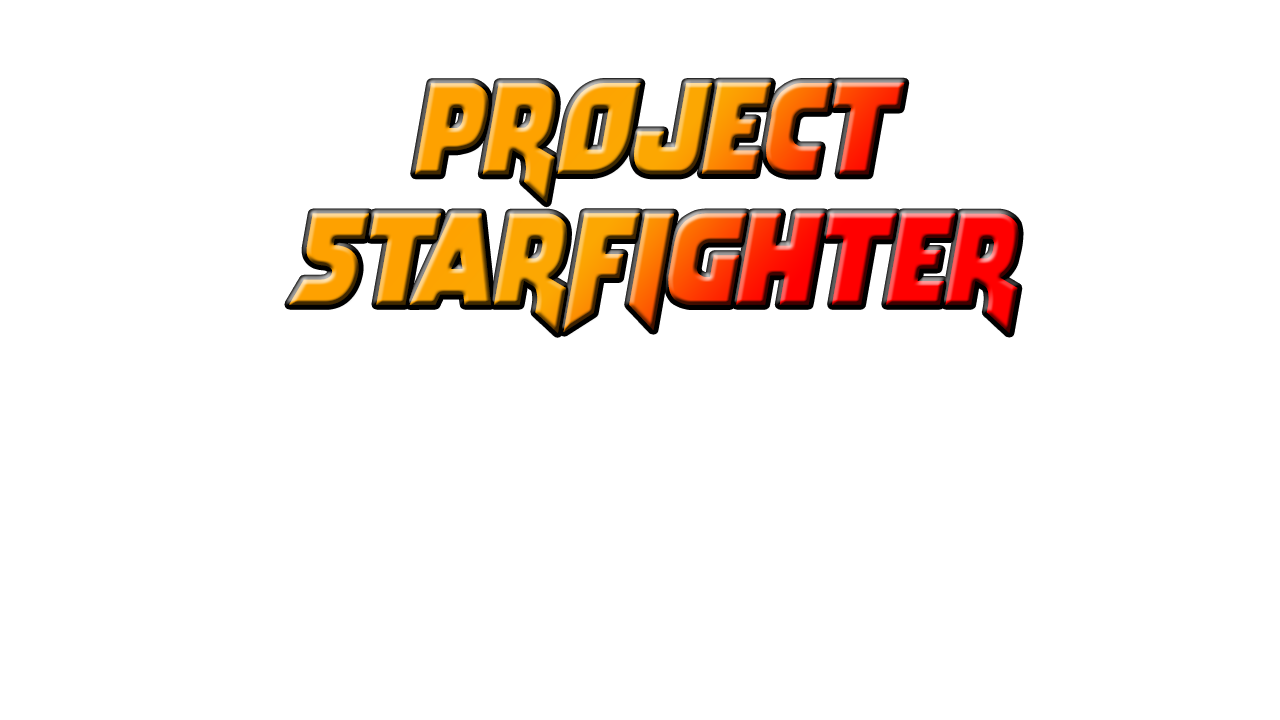
<style>
.page{position:relative;width:1280px;height:720px;background:#ffffff}
.page>*{position:absolute;margin:0}
.t1{font:130px/83.3px "Arwing";font-style:italic}
.t2{font:130px/83.3px "Arwing";letter-spacing:-0.16em;font-style:italic}
.t3{font:130px/83.3px "Arwing";letter-spacing:-0.02em;font-style:italic}
</style>
<div class="page">
<p class="t1" style="left:289px;top:82px;width:730px;height:251px;text-align:center">Project<br>S<span class="t2">t</span><span class="t3">a</span>rfighter</p>
</div>
